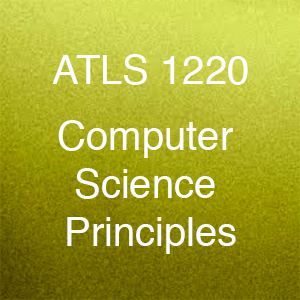
<style>
.page{position:relative;width:300px;height:300px}
.page>*{position:absolute;margin:0}
.t1{font:40px "Helvetica";color:#fefefe}
</style>
<div class="page">
<p class="t1" style="left:52px;top:54px;width:196px;height:200px;text-align:center">ATLS 1220<br><br>Computer <br>Science <br>Principles</p>
</div>
